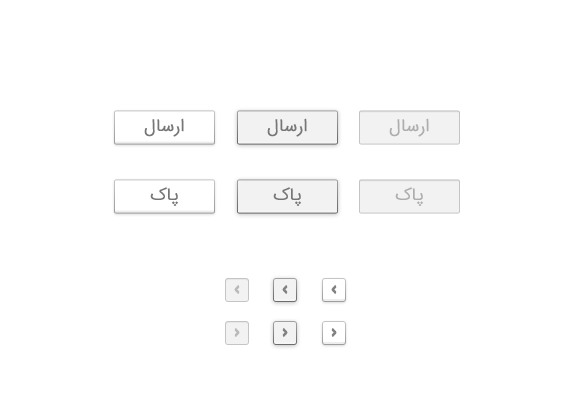
<style>
.page{position:relative;width:580px;height:420px;background:#ffffff}
.page>*{position:absolute;margin:0}
.t1{font:18px "Pouria-IranSans";color:#767676;font-weight:bold}
.t2{font:18px "Pouria-IranSans";color:#aeaeae;font-weight:bold}
</style>
<div class="page">
<p class="t1" style="left:144px;top:118px;width:40px;height:19px">ﻝﺎﺳﺭﺍ</p>
<p class="t1" style="left:267px;top:118px;width:40px;height:19px">ﻝﺎﺳﺭﺍ</p>
<p class="t2" style="left:389px;top:118px;width:40px;height:19px">ﻝﺎﺳﺭﺍ</p>
<p class="t1" style="left:150px;top:187px;width:28px;height:19px">کﺎﭘ</p>
<p class="t1" style="left:273px;top:187px;width:28px;height:19px">کﺎﭘ</p>
<p class="t2" style="left:395px;top:187px;width:28px;height:19px">کﺎﭘ</p>
</div>
